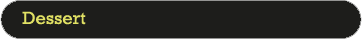
<style>
.page{position:relative;width:362px;height:39px;background:#1d1d1b}
.page>*{position:absolute;margin:0}
.t1{font:18px "Rockwell";color:#e1e164}
</style>
<div class="page">
<p class="t1" style="left:22px;top:11px;width:64px;height:14px">Dessert</p>
</div>
